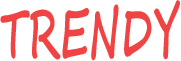
<style>
.page{position:relative;width:181px;height:61px;background:#ffffff}
.page>*{position:absolute;margin:0}
.t1{font:68.1px "SegoeScript-Bold";color:#f04444;scale:0.56 1}
</style>
<div class="page">
<p class="t1" style="left:0px;top:0px;width:180px;height:61px">TRENDY</p>
</div>
